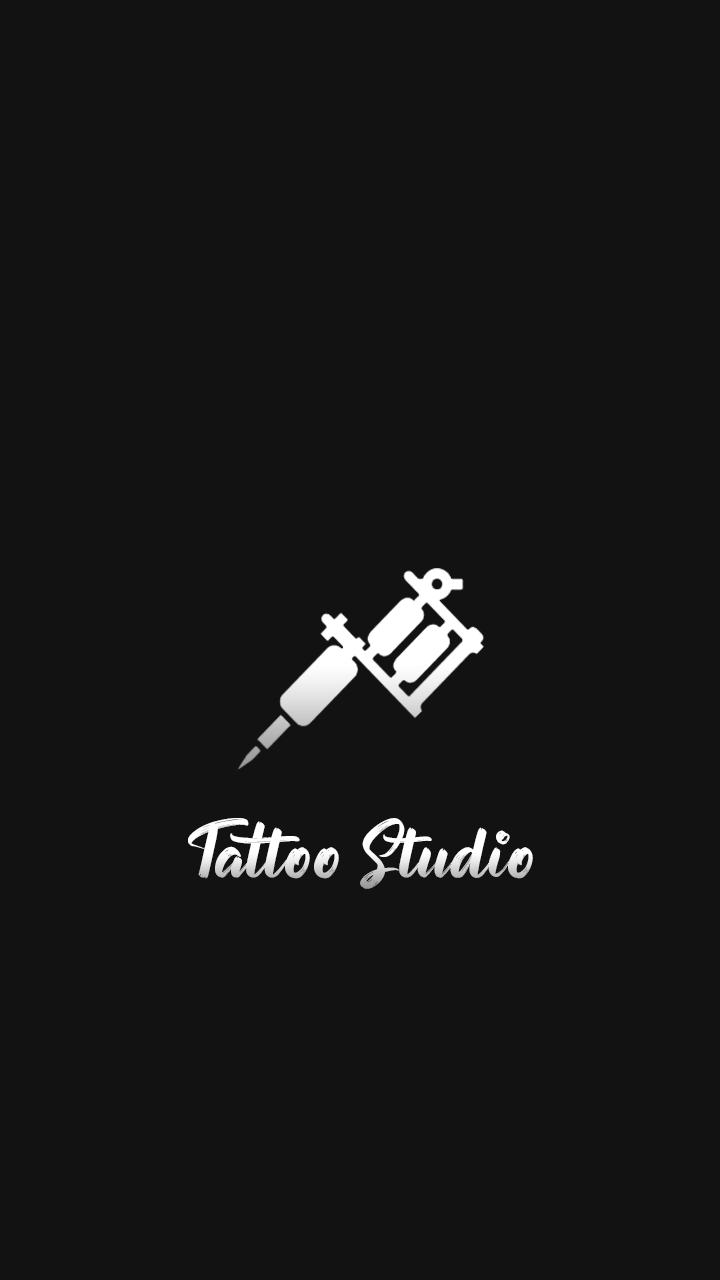
<style>
.page{position:relative;width:720px;height:1280px;background:#121212}
.page>*{position:absolute;margin:0}
.t1{font:72px "ButtonShieldPersonalUseOnly";color:#ffffff}
</style>
<div class="page">
<p class="t1" style="left:188px;top:818px;width:345px;height:71px">Tattoo Studio</p>
</div>
